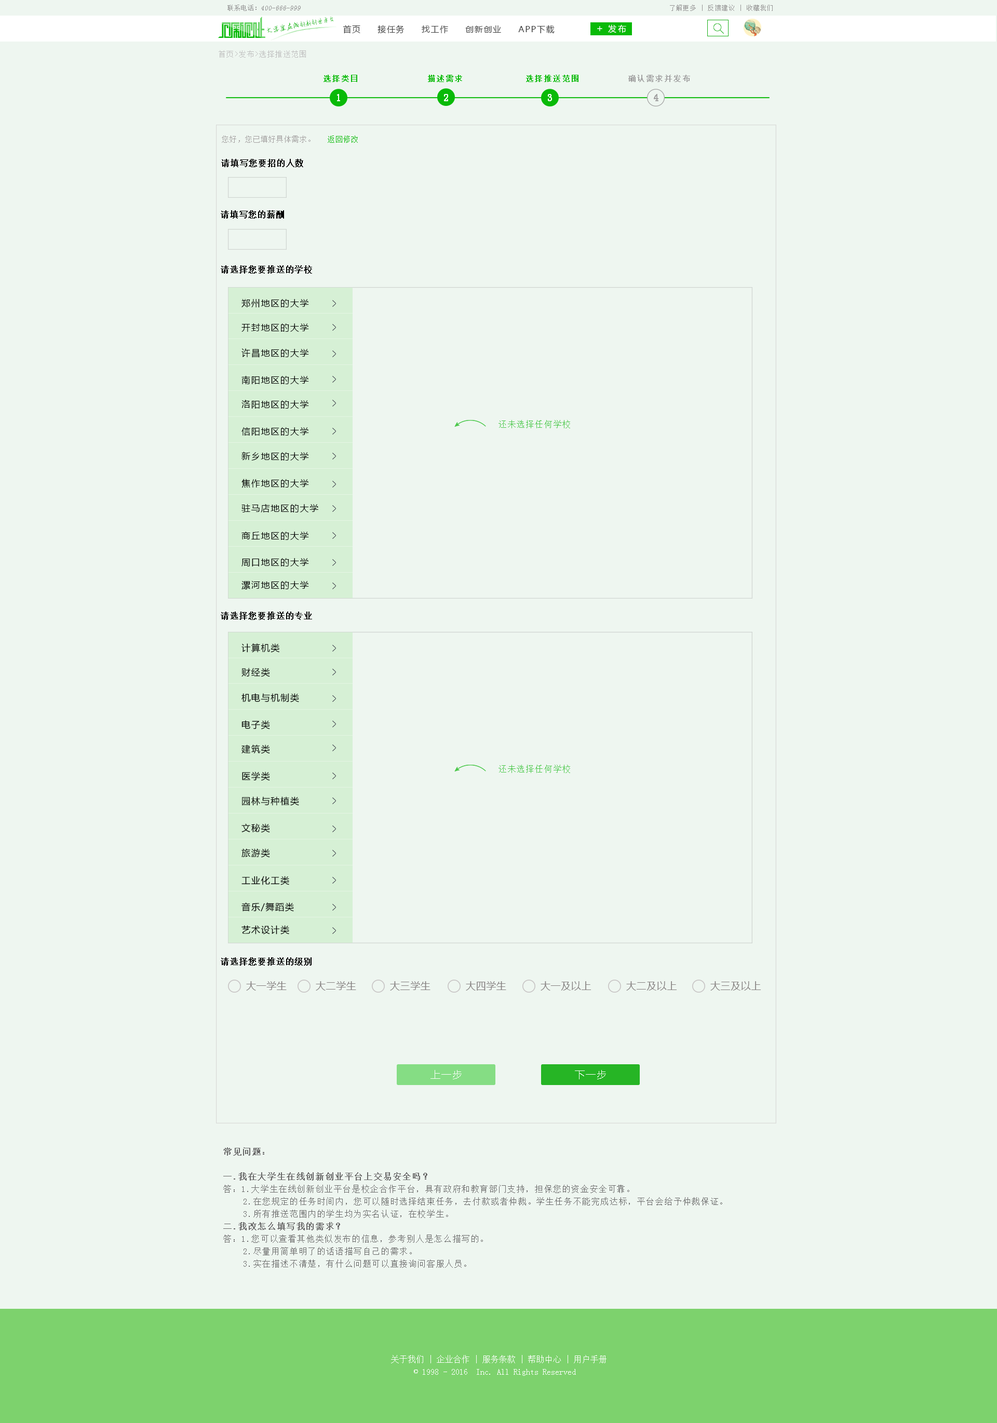
<style>
.page{position:relative;width:997px;height:1423px;background:#eef6f0}
.page>*{position:absolute;margin:0}
.t1{font:6.9px "SimSun";color:#959595;font-style:italic}
.t2{font:6.9px "SimSun";color:#959595}
.t3{font:6.2px "SimSun";letter-spacing:0.1em;color:#959494}
.t4{font:6.4px "AnJingCheng-Xing-2.0";letter-spacing:-0.01em;color:#09ba08}
.t5{font:7.2px "AnJingCheng-Xing-2.0";letter-spacing:-0.01em;color:#09ba08}
.t6{font:8.3px "MicrosoftYaHei";letter-spacing:0.1em;color:#3e3e3e}
.t7{font:9.7px "MicrosoftYaHei";letter-spacing:0.2em;color:#ffffff}
.t8{font:8.3px "MicrosoftYaHei";letter-spacing:0.2em;color:#ffffff}
.t9{font:7.3px "SimSun";letter-spacing:0.1em;color:#bebebe}
.t10{font:7.6px "SimSun";letter-spacing:0.1em;color:#09ba08;font-weight:bold}
.t11{font:7.6px "SimSun";letter-spacing:0.1em;color:#a2a2a2;font-weight:bold}
.t12{font:9.6px "SimSun";letter-spacing:0.1em;color:#ffffff;font-weight:bold}
.t13{font:9.7px "SimSun";letter-spacing:0.1em;color:#a2a2a2;font-weight:bold}
.t14{font:7.6px "SimSun";color:#a3a0a0}
.t15{font:7.6px "SimSun";color:#09ba08}
.t16{font:8.3px "SimSun";letter-spacing:0.05em;color:#000000;font-weight:bold}
.t17{font:9px "MicrosoftYaHei";letter-spacing:0.1em;color:#000000}
.t18{font:8.3px "SimSun";letter-spacing:0.1em;color:#4bc84b}
.t19{font:9.7px "MicrosoftYaHei";letter-spacing:0.05em;color:#858080}
.t20{font:9.7px "MicrosoftYaHei";letter-spacing:0.1em;color:#ffffff}
.t21{font:8.3px/12.5px "SimSun";letter-spacing:0.1em;color:#696969}
.t22{font:8.3px/12.5px "SimSun";letter-spacing:0.1em;color:#696969;font-weight:bold}
.t23{font:8.3px/12.5px "SimSun";color:#ffffff}
</style>
<div class="page">
<p class="t1" style="left:227px;top:5px;width:74px;height:6px"><span class="t2">联系电话：</span>400-666-999</p>
<p class="t3" style="left:670px;top:5px;width:103px;height:6px">了解更多 | 反馈建议 | 收藏我们</p>
<p class="t4" style="left:267px;top:16px;width:67px;height:17px;rotate:-10deg"><span class="t5">大学生在线</span>创新创业平台</p>
<p class="t6" style="left:343px;top:25px;width:212px;height:9px">首页     接任务     找工作     创新创业     APP下载</p>
<p class="t7" style="left:597px;top:26px;width:5px;height:5px">+</p>
<p class="t8" style="left:608px;top:24px;width:18px;height:9px">发布</p>
<p class="t9" style="left:219px;top:50px;width:87px;height:8px">首页&gt;发布&gt;选择推送范围</p>
<p class="t10" style="left:324px;top:75px;width:33px;height:7px">选择类目</p>
<p class="t10" style="left:428px;top:75px;width:34px;height:7px">描述需求</p>
<p class="t10" style="left:526px;top:75px;width:53px;height:7px">选择推送范围</p>
<p class="t11" style="left:628px;top:75px;width:62px;height:7px">确认需求并发布</p>
<p class="t12" style="left:337px;top:94px;width:3px;height:7px">1</p>
<p class="t12" style="left:444px;top:94px;width:4px;height:7px">2</p>
<p class="t12" style="left:548px;top:94px;width:4px;height:7px">3</p>
<p class="t13" style="left:654px;top:94px;width:4px;height:7px">4</p>
<p class="t14" style="left:222px;top:136px;width:136px;height:7px">您好，您已填好具体需求。   <span class="t15">返回修改</span></p>
<p class="t16" style="left:221px;top:159px;width:82px;height:8px">请填写您要招的人数</p>
<p class="t16" style="left:221px;top:210px;width:63px;height:9px">请填写您的薪酬</p>
<p class="t16" style="left:221px;top:265px;width:91px;height:9px">请选择您要推送的学校</p>
<p class="t17" style="left:241px;top:299px;width:68px;height:8px">郑州地区的大学</p>
<p class="t17" style="left:241px;top:324px;width:68px;height:8px">开封地区的大学</p>
<p class="t17" style="left:241px;top:348px;width:68px;height:10px">许昌地区的大学</p>
<p class="t17" style="left:241px;top:376px;width:68px;height:8px">南阳地区的大学</p>
<p class="t17" style="left:241px;top:400px;width:68px;height:9px">洛阳地区的大学</p>
<p class="t18" style="left:499px;top:420px;width:71px;height:8px">还未选择任何学校</p>
<p class="t17" style="left:241px;top:427px;width:68px;height:9px">信阳地区的大学</p>
<p class="t17" style="left:241px;top:452px;width:68px;height:9px">新乡地区的大学</p>
<p class="t17" style="left:241px;top:479px;width:68px;height:9px">焦作地区的大学</p>
<p class="t17" style="left:241px;top:504px;width:77px;height:9px">驻马店地区的大学</p>
<p class="t17" style="left:241px;top:532px;width:68px;height:8px">商丘地区的大学</p>
<p class="t17" style="left:241px;top:558px;width:68px;height:9px">周口地区的大学</p>
<p class="t17" style="left:241px;top:581px;width:68px;height:9px">漯河地区的大学</p>
<p class="t16" style="left:221px;top:612px;width:91px;height:8px">请选择您要推送的专业</p>
<p class="t17" style="left:241px;top:643px;width:39px;height:10px">计算机类</p>
<p class="t17" style="left:241px;top:668px;width:29px;height:9px">财经类</p>
<p class="t17" style="left:241px;top:693px;width:58px;height:10px">机电与机制类</p>
<p class="t17" style="left:241px;top:720px;width:29px;height:10px">电子类</p>
<p class="t17" style="left:241px;top:745px;width:29px;height:9px">建筑类</p>
<p class="t17" style="left:242px;top:772px;width:28px;height:9px">医学类</p>
<p class="t18" style="left:499px;top:765px;width:71px;height:8px">还未选择任何学校</p>
<p class="t17" style="left:242px;top:797px;width:57px;height:9px">园林与种植类</p>
<p class="t17" style="left:241px;top:824px;width:29px;height:9px">文秘类</p>
<p class="t17" style="left:241px;top:849px;width:29px;height:9px">旅游类</p>
<p class="t17" style="left:241px;top:876px;width:48px;height:9px">工业化工类</p>
<p class="t17" style="left:241px;top:903px;width:53px;height:9px">音乐/舞蹈类</p>
<p class="t17" style="left:241px;top:925px;width:48px;height:10px">艺术设计类</p>
<p class="t16" style="left:221px;top:958px;width:91px;height:8px">请选择您要推送的级别</p>
<p class="t19" style="left:246px;top:981px;width:41px;height:10px">大一学生</p>
<p class="t19" style="left:316px;top:981px;width:40px;height:10px">大二学生</p>
<p class="t19" style="left:390px;top:981px;width:41px;height:10px">大三学生</p>
<p class="t19" style="left:466px;top:981px;width:40px;height:10px">大四学生</p>
<p class="t19" style="left:541px;top:981px;width:50px;height:10px">大一及以上</p>
<p class="t19" style="left:626px;top:981px;width:51px;height:10px">大二及以上</p>
<p class="t19" style="left:710px;top:981px;width:51px;height:10px">大三及以上</p>
<p class="t20" style="left:431px;top:1070px;width:31px;height:10px">上一步</p>
<p class="t20" style="left:575px;top:1070px;width:31px;height:10px">下一步</p>
<p class="t21" style="left:223px;top:1148px;width:499px;height:120px"><span class="t22">常见问题：<br><br>一.我在大学生在线创新创业平台上交易安全吗？<br></span>答：1.大学生在线创新创业平台是校企合作平台，具有政府和教育部门支持，担保您的资金安全可靠。<br>    2.在您规定的任务时间内，您可以随时选择结束任务，去付款或者仲裁。学生任务不能完成达标，平台会给予仲裁保证。<br>    3.所有推送范围内的学生均为实名认证，在校学生。<br><span class="t22">二.我改怎么填写我的需求？<br></span>答：1.您可以查看其他类似发布的信息，参考别人是怎么描写的。<br>    2.尽量用简单明了的话语描写自己的需求。<br>    3.实在描述不清楚，有什么问题可以直接询问客服人员。</p>
<p class="t23" style="left:391px;top:1355px;width:216px;height:21px;text-align:center">关于我们 | 企业合作 | 服务条款 | 帮助中心 | 用户手册<br>© 1998 - 2016  Inc. All Rights Reserved</p>
</div>
